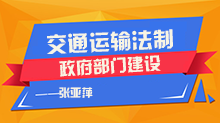
<style>
.page{position:relative;width:220px;height:123px}
.page>*{position:absolute;margin:0}
.t1{font:21.3px "JLinXin";color:#f8f5e4}
.t2{font:17px "JLinXin";color:#f8f5e4}
.t3{font:11.4px "JLinXin";color:#f8f5e4}
</style>
<div class="page">
<p class="t1" style="left:47px;top:29px;width:126px;height:25px;rotate:-2deg">交通运输法制</p>
<p class="t2" style="left:59px;top:55px;width:102px;height:22px;rotate:-4deg">政府部门建设</p>
<p class="t3" style="left:59px;top:87px;width:34px;height:11px">张亚萍</p>
</div>
